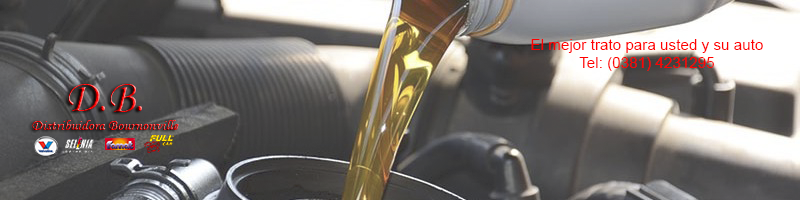
<style>
.page{position:relative;width:800px;height:200px}
.page>*{position:absolute;margin:0}
.t1{font:15.2px "ArialMT";color:#ff0000}
.t2{font:15.2px "MonotypeCorsiva"}
.t3{font:45.7px "MonotypeCorsiva"}
</style>
<div class="page">
<p class="t1" style="left:531px;top:39px;width:232px;height:32px;text-align:center">El mejor trato para usted y su auto<br>Tel: (0381) 4231295</p>
<p class="t2" style="left:32px;top:84px;width:147px;height:46px;text-align:center"><span class="t3">D.B.<br></span>Distribuidora Bournonville</p>
</div>
